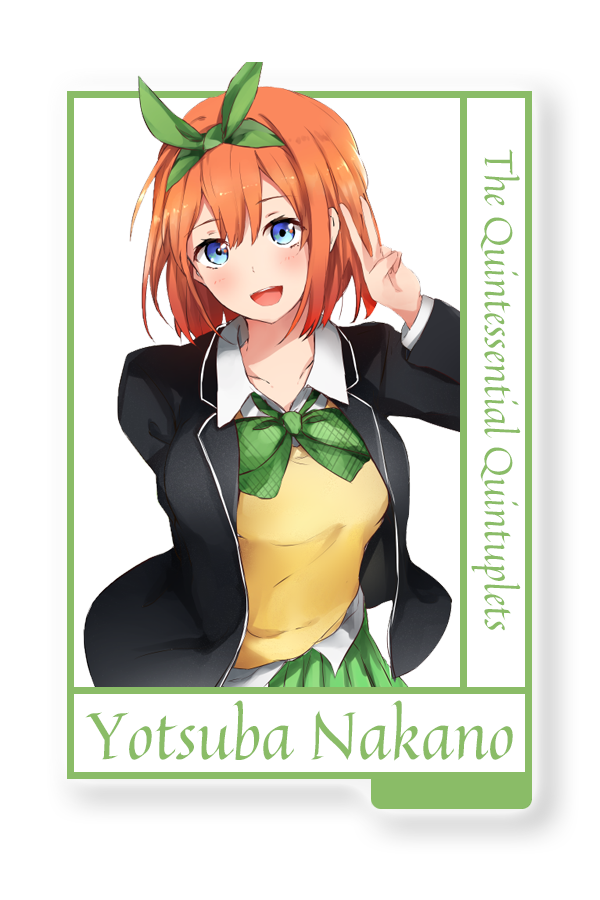
<style>
.page{position:relative;width:600px;height:900px;background:#ffffff}
.page>*{position:absolute;margin:0}
.t1{font:39px "Quintessential-Regular";color:#8abc67}
.t2{font:65.2px "Quintessential-Regular";color:#8abc67}
</style>
<div class="page">
<p class="t1" style="left:471px;top:149px;width:50px;height:482px;rotate:90deg">The Quintessential Quintuplets</p>
<p class="t2" style="left:85px;top:700px;width:428px;height:61px">Yotsuba Nakano</p>
</div>
